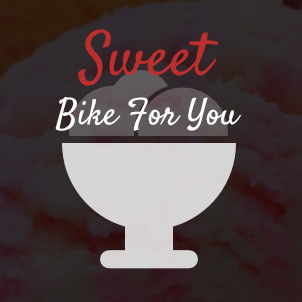
<style>
.page{position:relative;width:302px;height:302px}
.page>*{position:absolute;margin:0}
.t1{font:60px "Satisfy";color:#bd2f2f}
.t2{font:36px "Satisfy";color:#ffffff}
</style>
<div class="page">
<p class="t1" style="left:78px;top:29px;width:141px;height:57px">Sweet</p>
<p class="t2" style="left:55px;top:97px;width:186px;height:34px">Bike For You</p>
</div>
